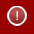
<style>
.page{position:relative;width:34px;height:34px;background:#990000}
.page>*{position:absolute;margin:0}
.t1{font:12px "ArialMT";letter-spacing:0.1em;color:#ffffff}
</style>
<div class="page">
<p class="t1" style="left:16px;top:11px;width:2px;height:9px">!</p>
</div>
